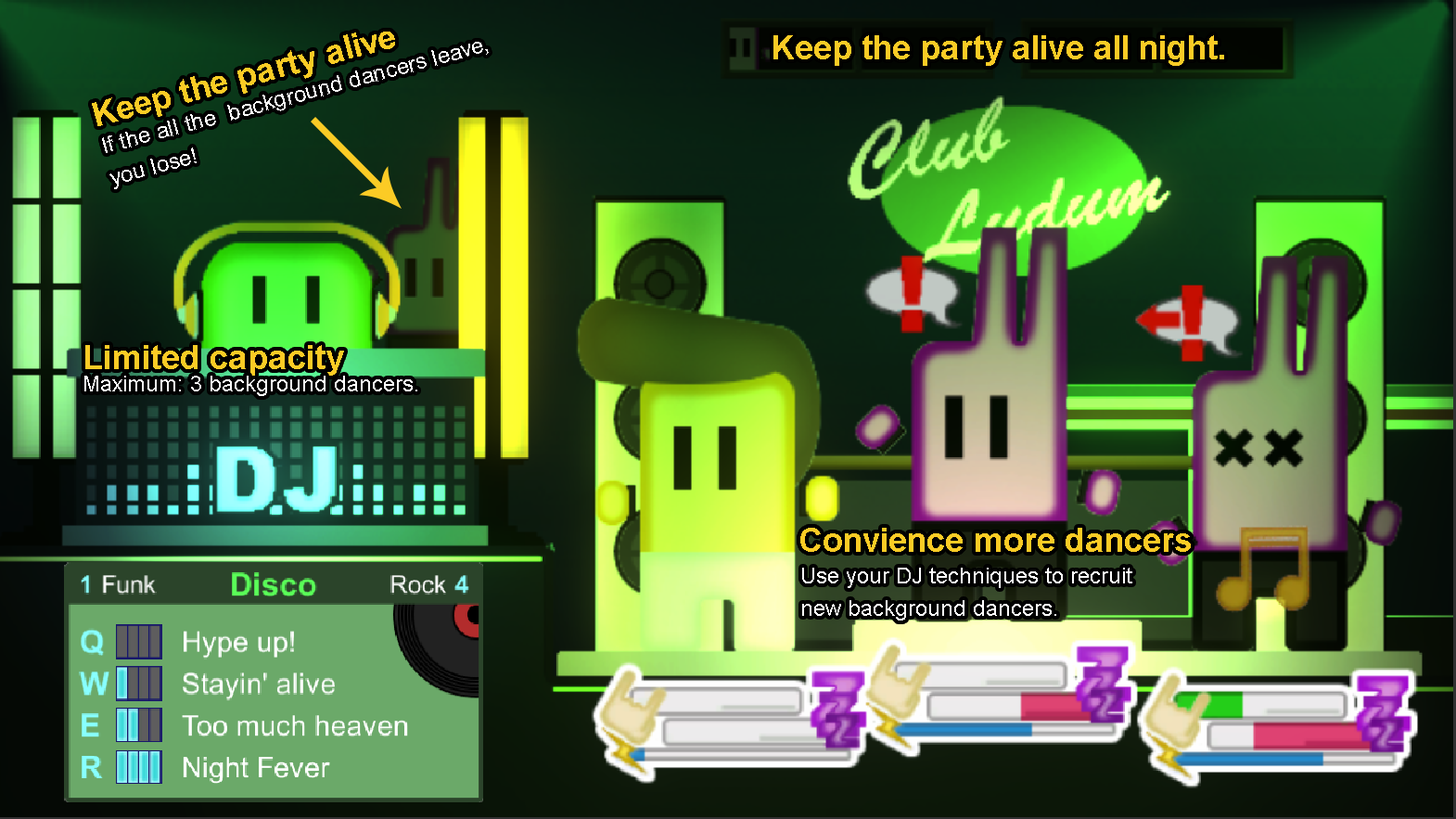
<style>
.page{position:relative;width:1456px;height:819px}
.page>*{position:absolute;margin:0}
.t1{font:33.4px "Arial-BoldMT";color:#fbcb25}
.t2{font:22.3px/32.5px "ArialMT";color:#ffffff}
.t3{font:22.3px "ArialMT";color:#ffffff}
</style>
<div class="page">
<p class="t1" style="left:92px;top:32px;width:303px;height:94px;rotate:-15deg">Keep the party alive</p>
<p class="t2" style="left:102px;top:42px;width:387px;height:147px;rotate:-15deg">If the all the  background dancers leave,<br>you lose!</p>
<p class="t1" style="left:773px;top:35px;width:451px;height:31px">Keep the party alive all night.</p>
<p class="t1" style="left:85px;top:345px;width:259px;height:31px">Limited capacity</p>
<p class="t3" style="left:84px;top:376px;width:333px;height:20px">Maximum: 3 background dancers.</p>
<p class="t1" style="left:800px;top:528px;width:391px;height:24px">Convience more dancers</p>
<p class="t2" style="left:802px;top:568px;width:330px;height:52px">Use your DJ techniques to recruit <br>new background dancers.</p>
</div>
